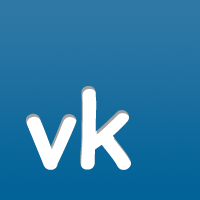
<style>
.page{position:relative;width:200px;height:200px}
.page>*{position:absolute;margin:0}
.t1{font:104.2px "ComicSansMS-Bold";color:#ffffff}
</style>
<div class="page">
<p class="t1" style="left:25px;top:86px;width:106px;height:84px">vk</p>
</div>
